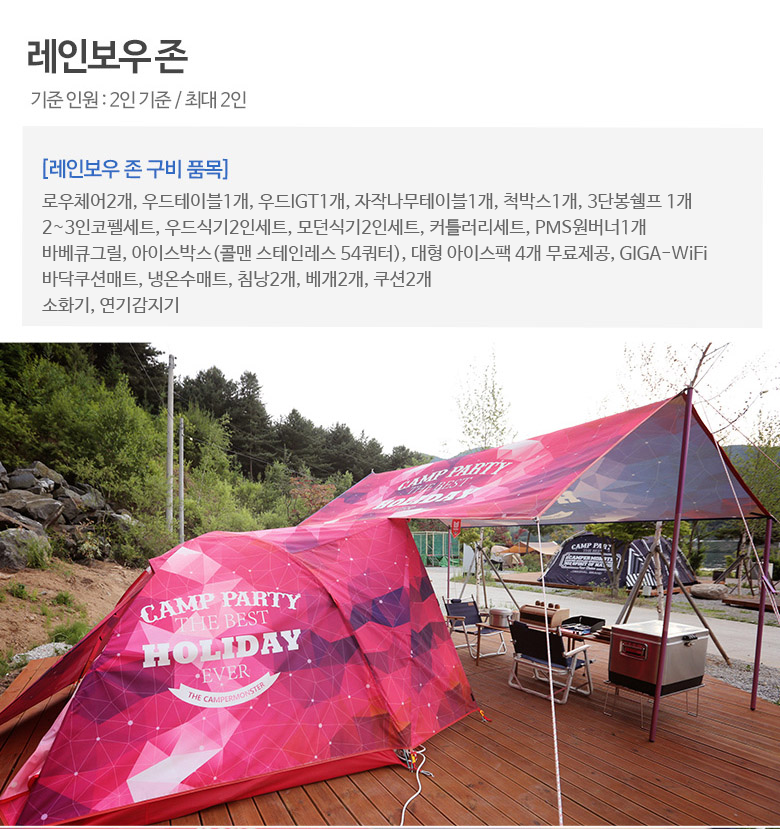
<style>
.page{position:relative;width:780px;height:829px;background:#ffffff}
.page>*{position:absolute;margin:0}
.t1{font:18px/26px "NanumBarunGothic";color:#666666}
</style>
<div class="page">
<p class="t1" style="left:42px;top:193px;width:665px;height:121px">로우체어2개, 우드테이블1개, 우드IGT1개, 자작나무테이블1개, 척박스1개, 3단봉쉘프 1개<br>2~3인코펠세트, 우드식기2인세트, 모던식기2인세트, 커틀러리세트, PMS원버너1개<br>바베큐그릴, 아이스박스(콜맨 스테인레스 54쿼터), 대형 아이스팩 4개 무료제공, GIGA-WiFi<br>바닥쿠션매트, 냉온수매트, 침낭2개, 베개2개, 쿠션2개<br>소화기, 연기감지기</p>
</div>
